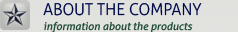
<style>
.page{position:relative;width:238px;height:32px}
.page>*{position:absolute;margin:0}
.t1{font:16.1px "Aller-Light";color:#02113c}
.t2{font:10.8px "Aller-Italic";color:#224332}
</style>
<div class="page">
<p class="t1" style="left:43px;top:2px;width:159px;height:14px">ABOUT THE COMPANY</p>
<p class="t2" style="left:44px;top:21px;width:149px;height:12px">information about the products</p>
</div>
